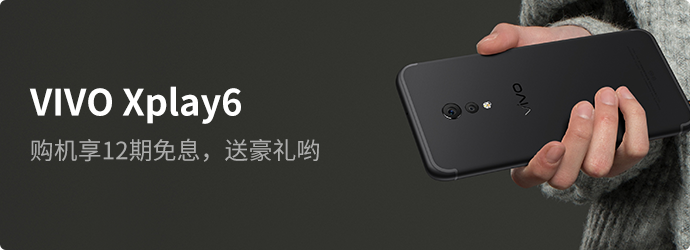
<style>
.page{position:relative;width:690px;height:250px}
.page>*{position:absolute;margin:0}
.t1{font:36px "SourceHanSansCN-Bold";color:#ffffff}
.t2{font:24px "SourceHanSansCN-Regular";color:#acadac}
</style>
<div class="page">
<p class="t1" style="left:29px;top:86px;width:212px;height:38px">VIVO Xplay6</p>
<p class="t2" style="left:30px;top:138px;width:289px;height:24px">购机享12期免息，送豪礼哟</p>
</div>
